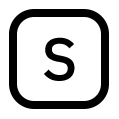
<style>
.page{position:relative;width:119px;height:119px;background:#ffffff}
.page>*{position:absolute;margin:0}
.t1{font:60px "IBMPlexSansKR-Medium";color:#000000}
</style>
<div class="page">
<p class="t1" style="left:44px;top:37px;width:31px;height:44px">S</p>
</div>
